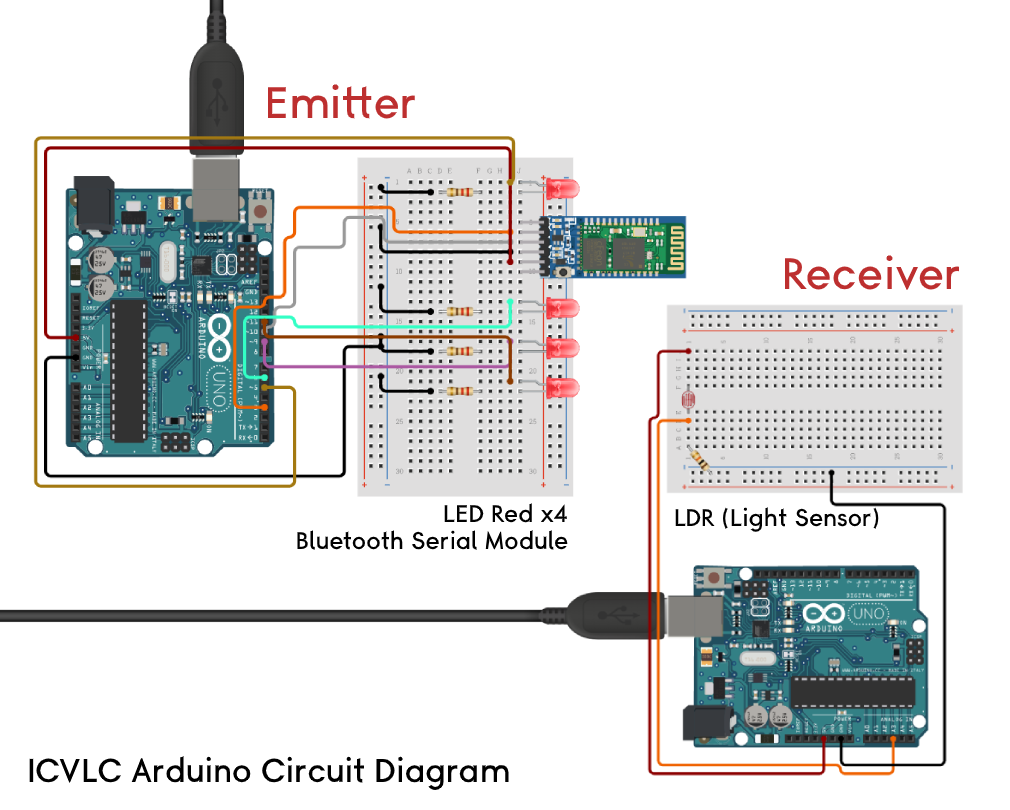
<style>
.page{position:relative;width:1010px;height:810px;background:#ffffff}
.page>*{position:absolute;margin:0}
.t1{font:44px "Simpel-Medium";color:#bd2f2f}
.t2{font:24px "Simpel-Medium";color:#000000}
.t3{font:33px "Simpel-Medium";color:#000000}
</style>
<div class="page">
<p class="t1" style="left:267px;top:84px;width:148px;height:35px">Emitter</p>
<p class="t1" style="left:784px;top:255px;width:176px;height:35px">Receiver</p>
<p class="t2" style="left:444px;top:503px;width:123px;height:20px">LED Red x4</p>
<p class="t2" style="left:675px;top:507px;width:204px;height:25px">LDR (Light Sensor)</p>
<p class="t2" style="left:297px;top:530px;width:271px;height:20px">Bluetooth Serial Module</p>
<p class="t3" style="left:29px;top:756px;width:480px;height:34px">ICVLC Arduino Circuit Diagram</p>
</div>
